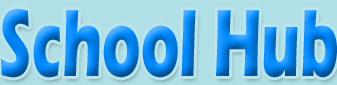
<style>
.page{position:relative;width:337px;height:85px;background:#b0e0e6}
.page>*{position:absolute;margin:0}
.t1{font:98.5px "ErasITC-Bold";scale:0.6 1}
</style>
<div class="page">
<p class="t1" style="left:0px;top:9px;width:337px;height:69px">School Hub</p>
</div>
